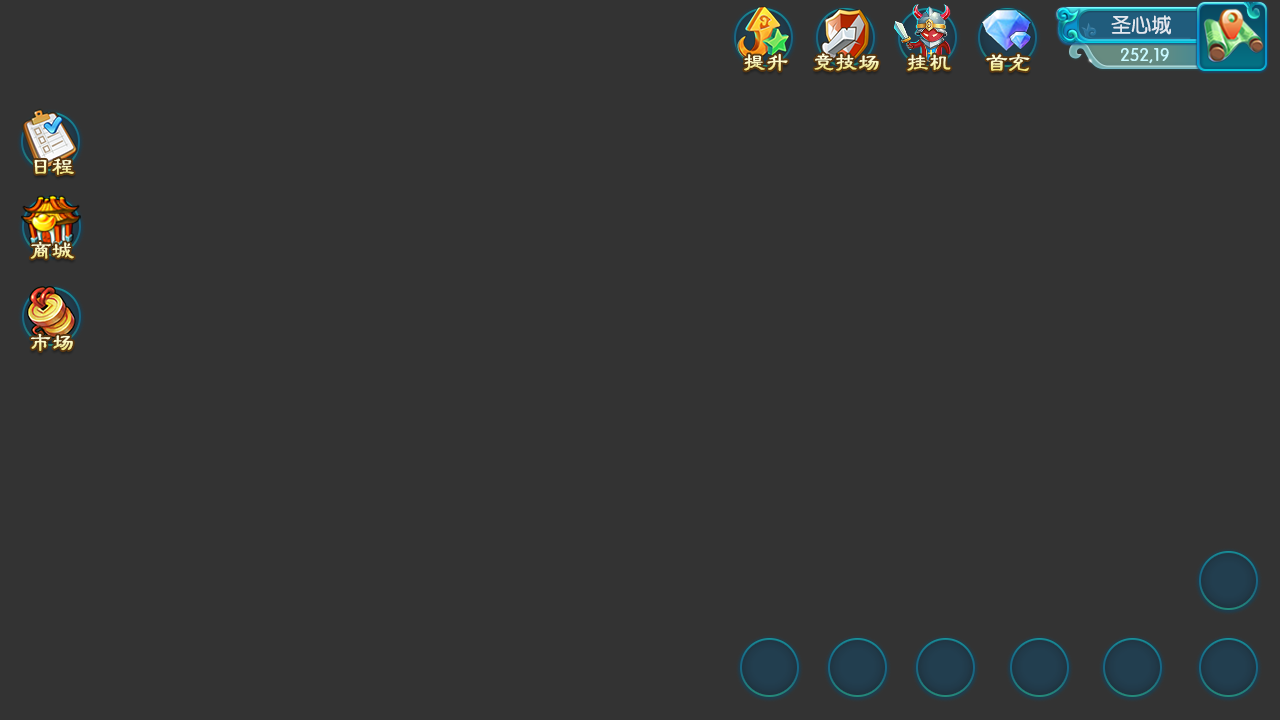
<style>
.page{position:relative;width:1280px;height:720px;background:#333333}
.page>*{position:absolute;margin:0}
.t1{font:20px "JZunYuan";color:#e3e8ef}
.t2{font:22px "FZLBJW--GB1-0";font-weight:bold}
.t3{font:18px "JZunYuan";color:#c7f9ff}
</style>
<div class="page">
<p class="t1" style="left:1111px;top:15px;width:60px;height:20px">圣心城</p>
<p class="t2" style="left:744px;top:53px;width:44px;height:18px">提升</p>
<p class="t2" style="left:814px;top:53px;width:65px;height:18px">竞技场</p>
<p class="t2" style="left:907px;top:54px;width:44px;height:17px">挂机</p>
<p class="t2" style="left:986px;top:54px;width:44px;height:18px">首充</p>
<p class="t3" style="left:1121px;top:48px;width:48px;height:16px">252,19</p>
<p class="t2" style="left:34px;top:158px;width:40px;height:17px">日程</p>
<p class="t2" style="left:30px;top:241px;width:44px;height:18px">商城</p>
<p class="t2" style="left:31px;top:333px;width:42px;height:18px">市场</p>
</div>
